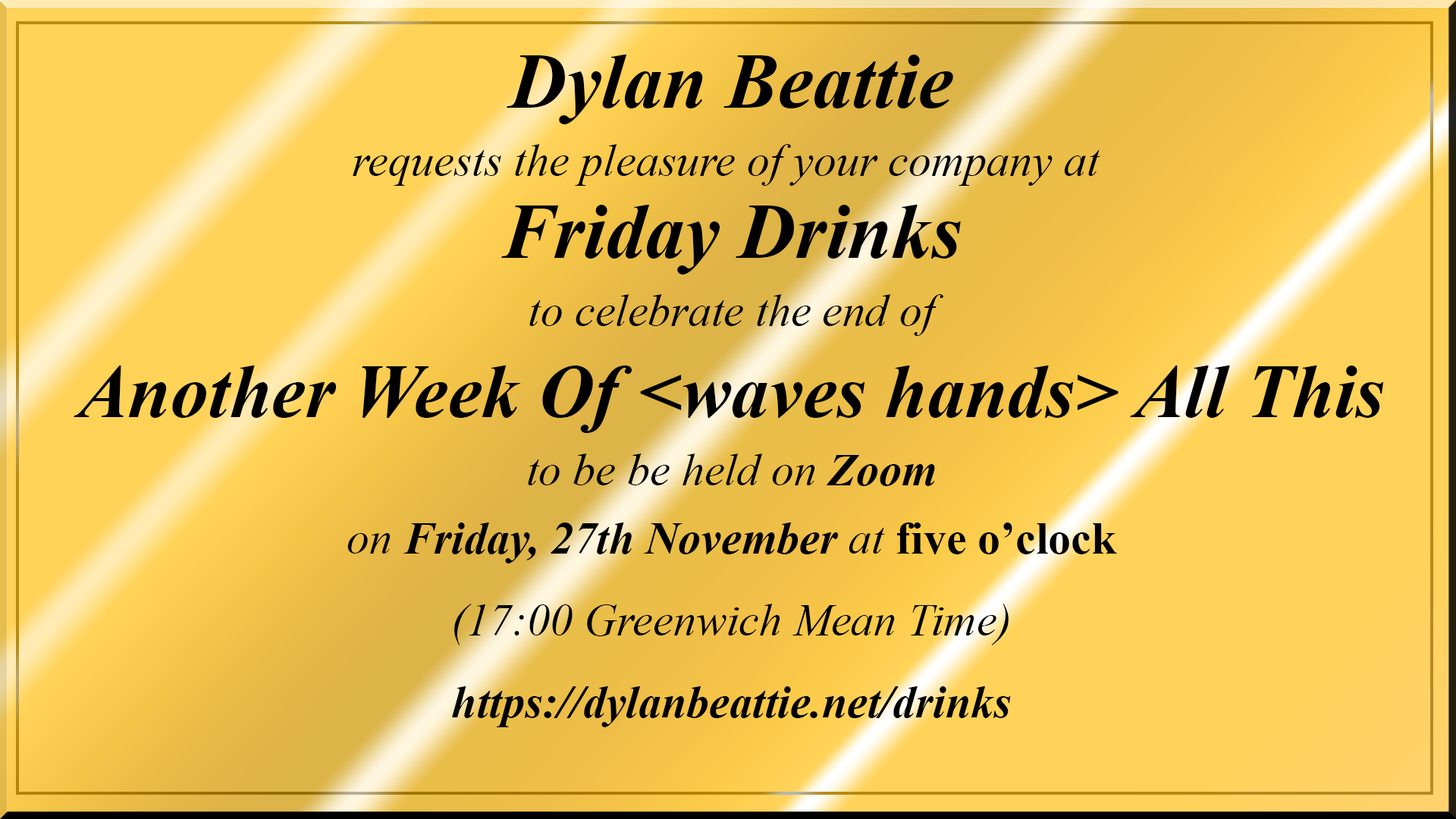
<style>
.page{position:relative;width:1456px;height:819px}
.page>*{position:absolute;margin:0}
.t1{font:45.5px/68.2px "TimesNewRomanPS-ItalicMT";color:#000000}
.t2{font:78.6px/81.9px "TimesNewRomanPS-BoldItalicMT";color:#000000}
.t3{font:75.8px/91px "TimesNewRomanPS-BoldItalicMT";color:#000000}
.t4{font:45.5px/68.2px "TimesNewRomanPS-BoldItalicMT";color:#000000}
.t5{font:45.5px/68.2px "TimesNewRomanPS-BoldMT";color:#000000}
.t6{font:45.5px/81.9px "TimesNewRomanPS-ItalicMT";color:#000000}
.t7{font:45.5px/81.9px "TimesNewRomanPS-BoldItalicMT";color:#000000}
</style>
<div class="page">
<p class="t1" style="left:74px;top:55px;width:1310px;height:672px;text-align:center"><span class="t2">Dylan Beattie<br></span>requests the pleasure of your company at <br><span class="t2">Friday Drinks<br></span>to celebrate the end of<br><span class="t3">Another Week Of &lt;waves hands&gt; All This<br></span>to be be held on <span class="t4">Zoom<br></span>on <span class="t4">Friday, 27th November</span> at <span class="t5">five o’clock<br></span><span class="t6">(17:00 Greenwich Mean Time)<br></span><span class="t7">https://dylanbeattie.net/drinks</span></p>
</div>
